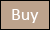
<style>
.page{position:relative;width:50px;height:30px;background:#bca28c}
.page>*{position:absolute;margin:0}
.t1{font:18px "Calibri";color:#ffffff}
</style>
<div class="page">
<p class="t1" style="left:12px;top:9px;width:27px;height:14px">Buy</p>
</div>
